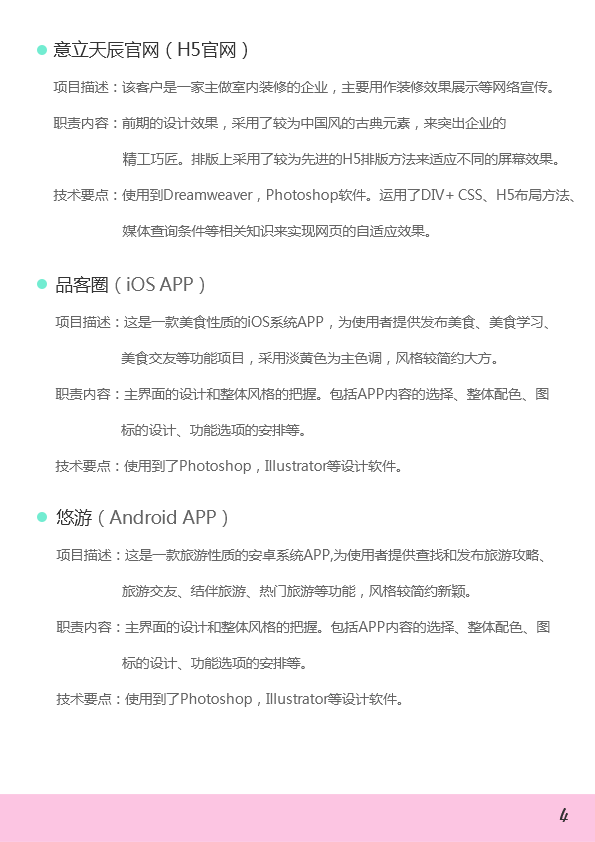
<style>
.page{position:relative;width:595px;height:842px;background:#ffffff}
.page>*{position:absolute;margin:0}
.t1{font:14px/36px "MicrosoftYaHei";letter-spacing:-0.02em;color:#666666}
.t2{font:18px/46px "MicrosoftYaHei";letter-spacing:-0.02em;color:#333333}
.t3{font:18px/46px "MicrosoftYaHei";letter-spacing:-0.02em;color:#666666}
.t4{font:18px "Freehand521BT-RegularC";letter-spacing:-0.02em;color:#333333}
</style>
<div class="page">
<p class="t1" style="left:53px;top:40px;width:521px;height:197px"><span class="t2">意立天辰官网（H5官网）<br></span>项目描述：该客户是一家主做室内装修的企业，主要用作装修效果展示等网络宣传。<br>职责内容：前期的设计效果，采用了较为中国风的古典元素，来突出企业的<br>          精工巧匠。排版上采用了较为先进的H5排版方法来适应不同的屏幕效果。<br>技术要点：使用到Dreamweaver，Photoshop软件。运用了DIV+ CSS、H5布局方法、<br>          媒体查询条件等相关知识来实现网页的自适应效果。</p>
<p class="t1" style="left:55px;top:276px;width:494px;height:198px"><span class="t2">品客圈</span><span class="t3">（iOS APP）<br></span>项目描述：这是一款美食性质的iOS系统APP，为使用者提供发布美食、美食学习、<br>         美食交友等功能项目，采用淡黄色为主色调，风格较简约大方。<br>职责内容：主界面的设计和整体风格的把握。包括APP内容的选择、整体配色、图<br>         标的设计、功能选项的安排等。<br>技术要点：使用到了Photoshop，Illustrator等设计软件。</p>
<p class="t1" style="left:56px;top:509px;width:494px;height:198px"><span class="t2">悠游</span><span class="t3">（Android APP）<br></span>项目描述：这是一款旅游性质的安卓系统APP,为使用者提供查找和发布旅游攻略、<br>         旅游交友、结伴旅游、热门旅游等功能，风格较简约新颖。<br>职责内容：主界面的设计和整体风格的把握。包括APP内容的选择、整体配色、图<br>         标的设计、功能选项的安排等。<br>技术要点：使用到了Photoshop，Illustrator等设计软件。</p>
<p class="t4" style="left:559px;top:808px;width:9px;height:14px">4</p>
</div>
